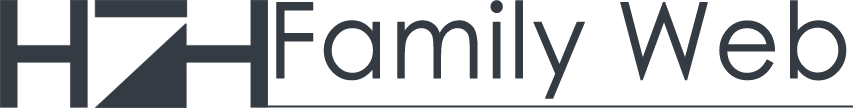
<style>
.page{position:relative;width:853px;height:108px;background:#ffffff}
.page>*{position:absolute;margin:0}
.t1{font:105px "STHeitiSC-Light";color:#343b42;font-weight:bold;text-decoration:underline;scale:0.95 1}
</style>
<div class="page">
<p class="t1" style="left:267px;top:0px;width:587px;height:108px">Family Web</p>
</div>
